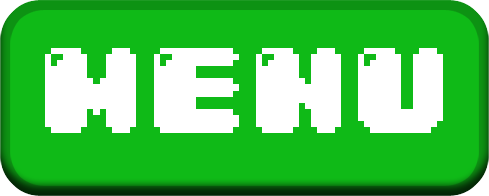
<style>
.page{position:relative;width:489px;height:196px;background:#0fba17}
.page>*{position:absolute;margin:0}
.t1{font:103.1px "04b30";letter-spacing:0.05em;color:#ffffff}
</style>
<div class="page">
<p class="t1" style="left:45px;top:48px;width:398px;height:85px">MENU</p>
</div>
